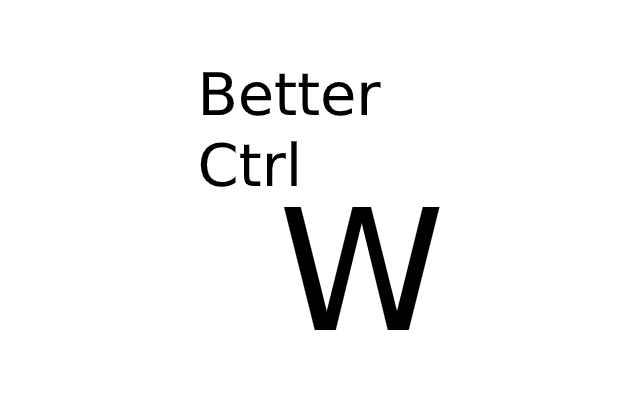
<style>
.page{position:relative;width:640px;height:400px;background:#ffffff}
.page>*{position:absolute;margin:0}
.t1{font:58.8px "DejaVuSans";color:#000000}
.t2{font:168.7px "DejaVuSans";color:#000000}
</style>
<div class="page">
<p class="t1" style="left:200px;top:72px;width:181px;height:115px">Better<br>Ctrl</p>
<p class="t2" style="left:284px;top:207px;width:156px;height:123px">W</p>
</div>
